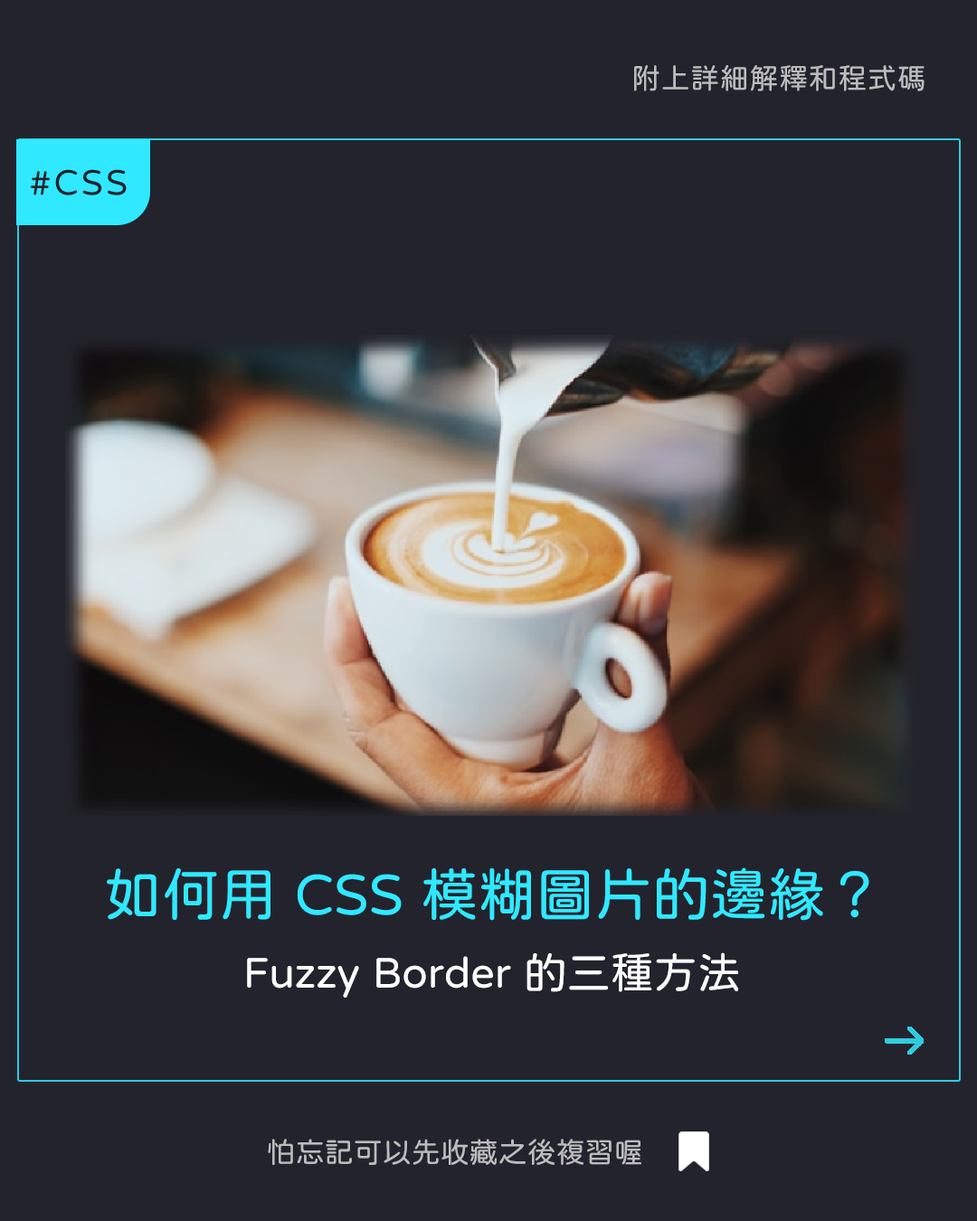
<style>
.page{position:relative;width:977px;height:1221px;background:#23232d}
.page>*{position:absolute;margin:0}
.t1{font:28.9px "jf-openhuninn-1.1";letter-spacing:0.02em;color:#bcbcbd}
.t2{font:36.2px "jf-openhuninn-1.1";letter-spacing:0.08em;color:#24232d}
.t3{font:57.9px "jf-openhuninn-1.1";color:#30e8ff}
.t4{font:43.4px "jf-openhuninn-1.1";color:#fefefe}
.t5{font:28.9px "jf-openhuninn-1.1";color:#bcbcbd}
</style>
<div class="page">
<p class="t1" style="left:634px;top:65px;width:290px;height:26px">附上詳細解釋和程式碼</p>
<p class="t2" style="left:30px;top:169px;width:97px;height:26px">#CSS</p>
<p class="t3" style="left:107px;top:867px;width:762px;height:54px">如何用 CSS 模糊圖片的邊緣？</p>
<p class="t4" style="left:247px;top:952px;width:492px;height:46px">Fuzzy Border 的三種方法</p>
<p class="t5" style="left:268px;top:1139px;width:373px;height:26px">怕忘記可以先收藏之後複習喔</p>
</div>
